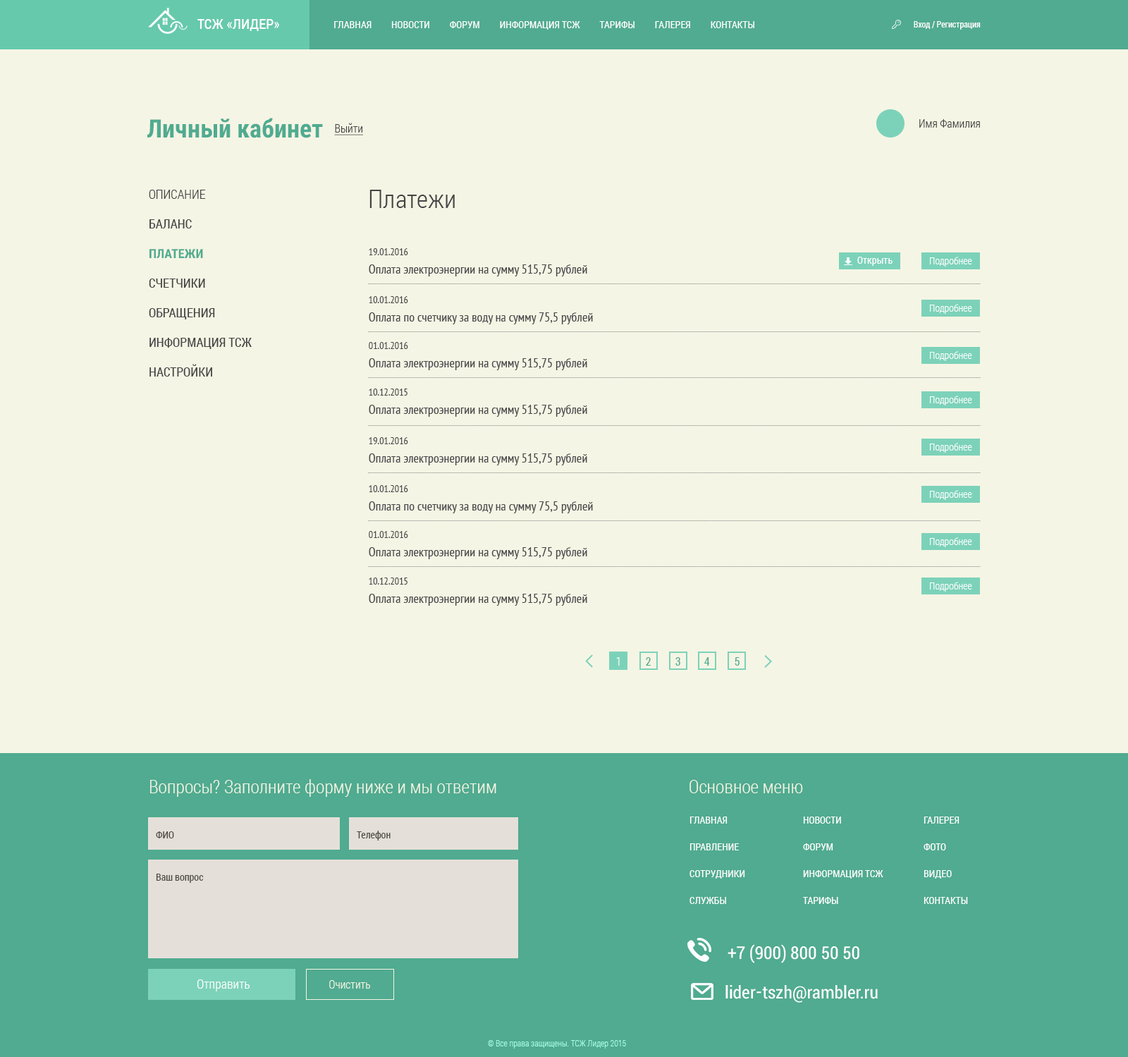
<style>
.page{position:relative;width:1128px;height:1057px;background:#f5f5e5}
.page>*{position:absolute;margin:0}
.t1{font:14.1px "RobotoCondensed-Regular";letter-spacing:0.005em;color:#ffffff}
.t2{font:9.9px "RobotoCondensed-Regular";letter-spacing:0.005em;color:#ffffff}
.t3{font:8.5px "RobotoCondensed-Regular";color:#ffffff}
.t4{font:25.4px "RobotoCondensed-Bold";color:#50ab90}
.t5{font:11.3px "RobotoCondensed-Light";color:#454545;text-decoration:underline}
.t6{font:11.3px "RobotoCondensed-Light";color:#454545}
.t7{font:12.7px/29.6px "RobotoCondensed-Regular";color:#454545}
.t8{font:12.7px/29.6px "RobotoCondensed-Light";color:#454545}
.t9{font:12.7px/29.6px "RobotoCondensed-Bold";color:#50ab90}
.t10{font:25.4px "RobotoCondensed-Light";color:#454545}
.t11{font:12.7px/18.3px "PTSans-Narrow";letter-spacing:0.005em;color:#48494a}
.t12{font:9.9px/18.3px "PTSans-Narrow";letter-spacing:0.005em;color:#48494a}
.t13{font:9.9px "RobotoCondensed-Regular";letter-spacing:0.005em;color:#fefeff}
.t14{font:9.9px "RobotoCondensed-Light";letter-spacing:0.005em;color:#fefeff}
.t15{font:11.3px "RobotoCondensed-Light";color:#ffffff}
.t16{font:11.3px "RobotoCondensed-Regular";color:#50ab90}
.t17{font:18.3px "RobotoCondensed-Light";color:#f5f5e5}
.t18{font:9.9px/26.8px "RobotoCondensed-Regular";color:#ffffff}
.t19{font:9.9px "RobotoCondensed-Regular";color:#4c4a46}
.t20{font:18.3px "Roboto-Condensed";color:#ffffff}
.t21{font:12.7px "RobotoCondensed-Light";color:#ffffff}
.t22{font:11.3px "RobotoCondensed-Light";color:#f5f5e5}
.t23{font:8.5px "RobotoCondensed-Light";color:#a6fde3}
</style>
<div class="page">
<p class="t1" style="left:197px;top:19px;width:82px;height:12px">ТСЖ «ЛИДЕР»</p>
<p class="t2" style="left:334px;top:21px;width:420px;height:9px">ГЛАВНАЯ         НОВОСТИ         ФОРУМ         ИНФОРМАЦИЯ ТСЖ         ТАРИФЫ         ГАЛЕРЕЯ         КОНТАКТЫ</p>
<p class="t3" style="left:914px;top:21px;width:67px;height:9px">Вход / Регистрация</p>
<p class="t4" style="left:147px;top:118px;width:176px;height:20px">Личный кабинет</p>
<p class="t5" style="left:334px;top:123px;width:30px;height:12px">Выйти</p>
<p class="t6" style="left:919px;top:119px;width:61px;height:9px">Имя Фамилия</p>
<p class="t7" style="left:149px;top:190px;width:103px;height:187px"><span class="t8">ОПИСАНИЕ<br></span>БАЛАНС<br><span class="t9">ПЛАТЕЖИ<br></span>СЧЕТЧИКИ<br>ОБРАЩЕНИЯ<br>ИНФОРМАЦИЯ ТСЖ<br>НАСТРОЙКИ</p>
<p class="t10" style="left:369px;top:190px;width:86px;height:18px">Платежи</p>
<p class="t11" style="left:369px;top:248px;width:218px;height:28px"><span class="t12">19.01.2016<br></span>Оплата электроэнергии на сумму 515,75 рублей</p>
<p class="t13" style="left:857px;top:257px;width:36px;height:9px">Открыть</p>
<p class="t14" style="left:930px;top:257px;width:42px;height:10px">Подробнее</p>
<p class="t11" style="left:369px;top:296px;width:224px;height:28px"><span class="t12">10.01.2016<br></span>Оплата по счетчику за воду на сумму 75,5 рублей</p>
<p class="t14" style="left:930px;top:304px;width:42px;height:10px">Подробнее</p>
<p class="t11" style="left:369px;top:342px;width:218px;height:28px"><span class="t12">01.01.2016<br></span>Оплата электроэнергии на сумму 515,75 рублей</p>
<p class="t14" style="left:930px;top:351px;width:42px;height:10px">Подробнее</p>
<p class="t11" style="left:369px;top:389px;width:218px;height:28px"><span class="t12">10.12.2015<br></span>Оплата электроэнергии на сумму 515,75 рублей</p>
<p class="t14" style="left:930px;top:396px;width:42px;height:9px">Подробнее</p>
<p class="t11" style="left:369px;top:437px;width:218px;height:28px"><span class="t12">19.01.2016<br></span>Оплата электроэнергии на сумму 515,75 рублей</p>
<p class="t14" style="left:930px;top:443px;width:42px;height:10px">Подробнее</p>
<p class="t11" style="left:369px;top:485px;width:224px;height:28px"><span class="t12">10.01.2016<br></span>Оплата по счетчику за воду на сумму 75,5 рублей</p>
<p class="t14" style="left:930px;top:490px;width:42px;height:10px">Подробнее</p>
<p class="t11" style="left:369px;top:531px;width:218px;height:28px"><span class="t12">01.01.2016<br></span>Оплата электроэнергии на сумму 515,75 рублей</p>
<p class="t14" style="left:930px;top:537px;width:42px;height:10px">Подробнее</p>
<p class="t11" style="left:369px;top:577px;width:218px;height:29px"><span class="t12">10.12.2015<br></span>Оплата электроэнергии на сумму 515,75 рублей</p>
<p class="t14" style="left:930px;top:582px;width:42px;height:10px">Подробнее</p>
<p class="t15" style="left:616px;top:657px;width:4px;height:9px">1</p>
<p class="t16" style="left:646px;top:657px;width:5px;height:9px">2</p>
<p class="t16" style="left:675px;top:657px;width:5px;height:9px">3</p>
<p class="t16" style="left:704px;top:657px;width:6px;height:9px">4</p>
<p class="t16" style="left:735px;top:657px;width:5px;height:9px">5</p>
<p class="t17" style="left:150px;top:779px;width:346px;height:18px">Вопросы? Заполните форму ниже и мы ответим</p>
<p class="t17" style="left:690px;top:780px;width:113px;height:13px">Основное меню</p>
<p class="t18" style="left:690px;top:817px;width:55px;height:87px">ГЛАВНАЯ<br>ПРАВЛЕНИЕ<br>СОТРУДНИКИ<br>СЛУЖБЫ</p>
<p class="t18" style="left:803px;top:817px;width:81px;height:87px">НОВОСТИ<br>ФОРУМ<br>ИНФОРМАЦИЯ ТСЖ<br>ТАРИФЫ</p>
<p class="t18" style="left:924px;top:817px;width:44px;height:87px">ГАЛЕРЕЯ<br>ФОТО<br>ВИДЕО<br>КОНТАКТЫ</p>
<p class="t19" style="left:156px;top:831px;width:18px;height:7px">ФИО</p>
<p class="t19" style="left:357px;top:831px;width:34px;height:9px">Телефон</p>
<p class="t19" style="left:156px;top:874px;width:48px;height:9px">Ваш вопрос</p>
<p class="t20" style="left:728px;top:944px;width:132px;height:19px">+7 (900) 800 50 50</p>
<p class="t21" style="left:197px;top:979px;width:53px;height:12px">Отправить</p>
<p class="t22" style="left:329px;top:980px;width:41px;height:9px">Очистить</p>
<p class="t20" style="left:726px;top:985px;width:152px;height:18px">lider-tszh@rambler.ru</p>
<p class="t23" style="left:488px;top:1040px;width:138px;height:8px">© Все права защищены. ТСЖ Лидер 2015</p>
</div>
